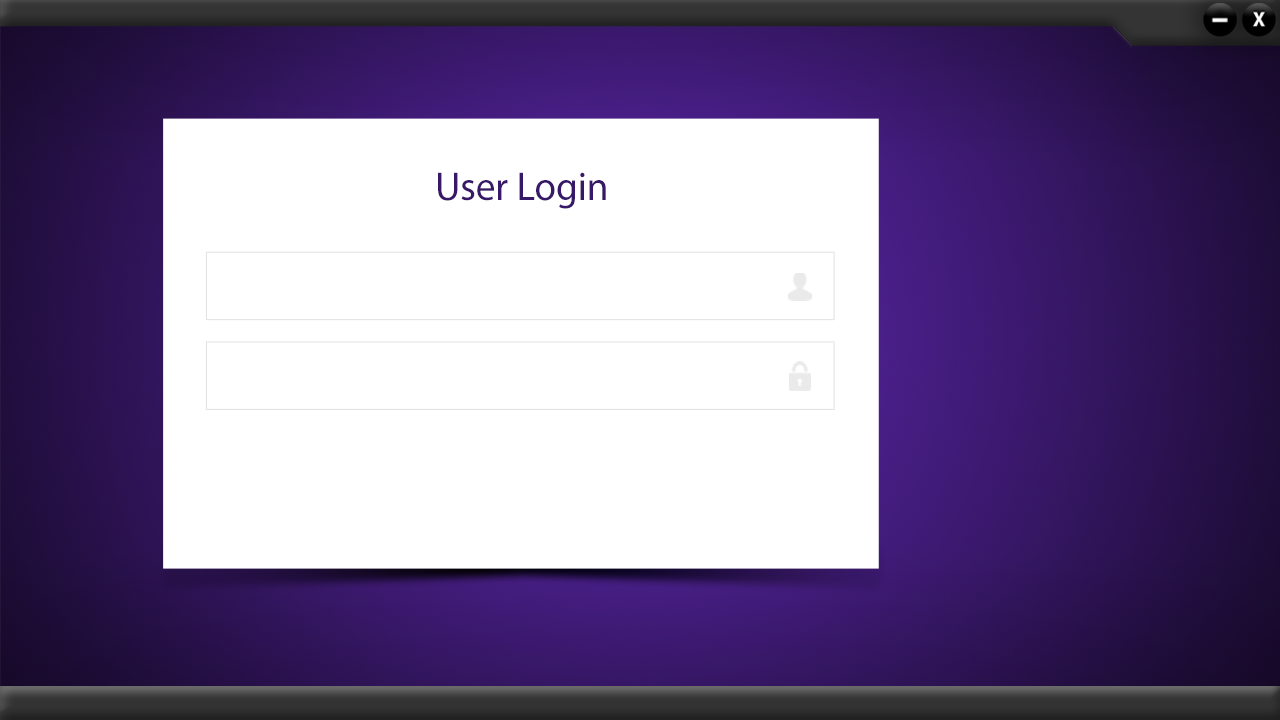
<style>
.page{position:relative;width:1280px;height:720px;background:#ffffff}
.page>*{position:absolute;margin:0}
.t1{font:40.5px "MyriadPro-Regular";color:#381868;scale:0.97 1}
</style>
<div class="page">
<p class="t1" style="left:438px;top:172px;width:168px;height:37px">User Login</p>
</div>
